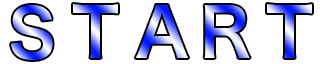
<style>
.page{position:relative;width:320px;height:64px;background:#ffffff}
.page>*{position:absolute;margin:0}
.t1{font:66.7px "HiraKakuProN-W6"}
</style>
<div class="page">
<p class="t1" style="left:11px;top:5px;width:42px;height:55px">S</p>
<p class="t1" style="left:73px;top:4px;width:45px;height:54px">T</p>
<p class="t1" style="left:204px;top:5px;width:46px;height:53px">R</p>
<p class="t1" style="left:267px;top:4px;width:45px;height:54px">T</p>
</div>
